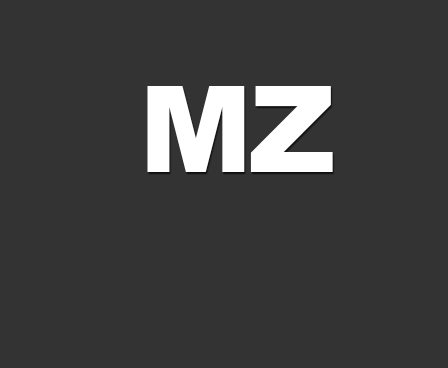
<style>
.page{position:relative;width:448px;height:368px;background:#333333}
.page>*{position:absolute;margin:0}
.t1{font:120px "Arial-Black";letter-spacing:-0.025em;color:#ffffff}
</style>
<div class="page">
<p class="t1" style="left:147px;top:86px;width:186px;height:86px">MZ</p>
</div>
